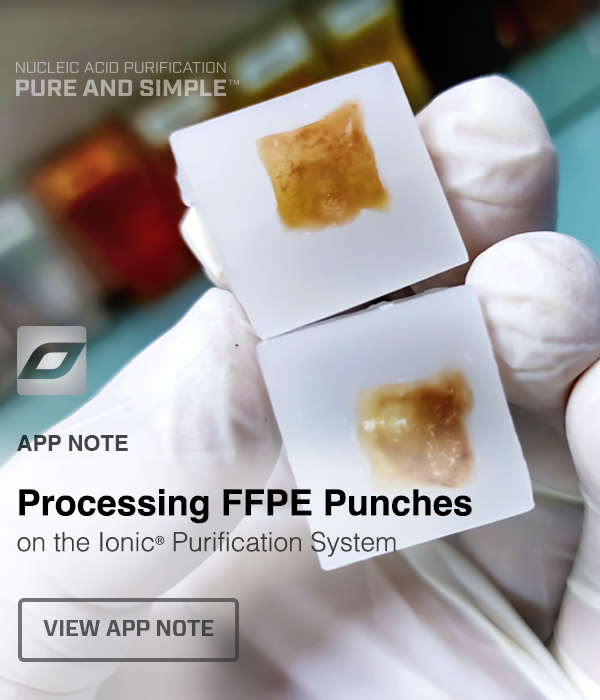
<style>
.page{position:relative;width:600px;height:700px}
.page>*{position:absolute;margin:0}
.t1{font:22px "Helvetica-Bold";color:#444446;text-transform:uppercase}
.t2{font:36px/35.9px "Helvetica-Bold";color:#000000}
.t3{font:26.5px/35.9px "Helvetica-Light";color:#3c3c3c}
.t4{font:20px/35.9px "Helvetica-Light";color:#3c3c3c}
.t5{font:21.9px "Forza-Bold";letter-spacing:-0.01em;color:#525152;text-transform:uppercase}
</style>
<div class="page">
<p class="t1" style="left:17px;top:435px;width:111px;height:16px">APP NOTE</p>
<p class="t2" style="left:17px;top:489px;width:455px;height:68px">Processing FFPE Punches<br><span class="t3">on the Ionic</span><span class="t4">®</span><span class="t3"> Purification System</span></p>
<p class="t5" style="left:43px;top:620px;width:171px;height:16px">View APP NOTE</p>
</div>
